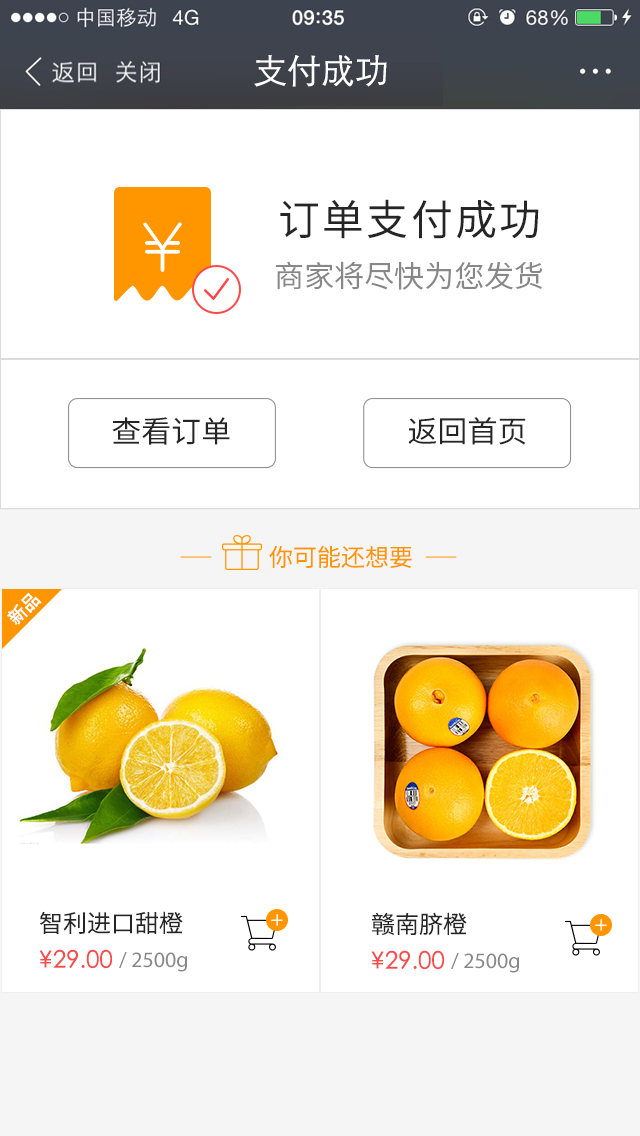
<style>
.page{position:relative;width:640px;height:1136px;background:#ffffff}
.page>*{position:absolute;margin:0}
.t1{font:34px "STXihei";color:#ffffff}
.t2{font:42px "SourceHanSansCN-Regular";letter-spacing:0.05em;color:#252525;text-transform:uppercase}
.t3{font:30px "SourceHanSansCN-Normal";color:#888888}
.t4{font:30px "SourceHanSansCN-Regular";color:#252525}
.t5{font:24px "SourceHanSansCN-Normal";color:#ff9600}
.t6{font:18px "SourceHanSansCN-Medium";color:#ffffff}
.t7{font:24px "SourceHanSansCN-Normal";color:#252525}
.t8{font:40px "STXihei";color:#fa4b4b}
.t9{font:24px "STXihei";color:#fa4b4b}
.t10{font:22px "MyriadPro-Regular";color:#888888}
</style>
<div class="page">
<p class="t1" style="left:254px;top:55px;width:133px;height:32px">支付成功</p>
<p class="t2" style="left:280px;top:199px;width:259px;height:40px">订单支付成功</p>
<p class="t3" style="left:275px;top:261px;width:267px;height:29px">商家将尽快为您发货</p>
<p class="t4" style="left:112px;top:417px;width:118px;height:28px">查看订单</p>
<p class="t4" style="left:408px;top:417px;width:118px;height:28px">返回首页</p>
<p class="t5" style="left:269px;top:545px;width:143px;height:23px">你可能还想要</p>
<p class="t6" style="left:7px;top:592px;width:35px;height:33px;rotate:-45deg">新品</p>
<p class="t7" style="left:40px;top:911px;width:143px;height:23px">智利进口甜橙</p>
<p class="t7" style="left:372px;top:912px;width:95px;height:23px">赣南脐橙</p>
<p class="t8" style="left:39px;top:950px;width:13px;height:18px">¥</p>
<p class="t9" style="left:53px;top:949px;width:59px;height:20px">29.00</p>
<p class="t10" style="left:119px;top:952px;width:68px;height:20px">/ 2500g</p>
<p class="t8" style="left:371px;top:951px;width:13px;height:18px">¥</p>
<p class="t9" style="left:385px;top:950px;width:59px;height:20px">29.00</p>
<p class="t10" style="left:451px;top:953px;width:68px;height:20px">/ 2500g</p>
</div>
